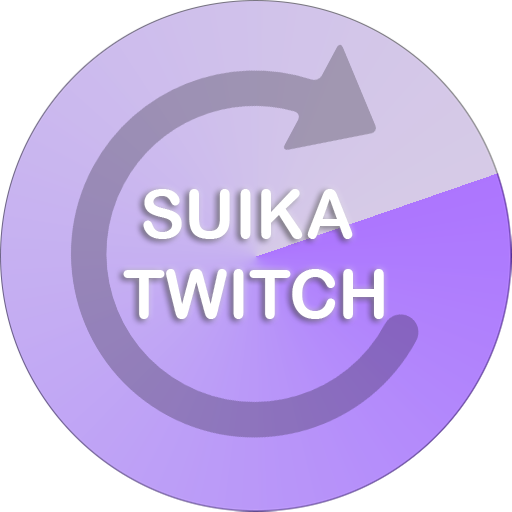
<style>
.page{position:relative;width:512px;height:512px;background:#ffffff}
.page>*{position:absolute;margin:0}
.t1{font:66.8px "ArialRoundedMTBold";color:#ffffff}
</style>
<div class="page">
<p class="t1" style="left:123px;top:189px;width:261px;height:130px">SUIKA<br>TWITCH</p>
</div>
